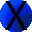
<style>
.page{position:relative;width:32px;height:32px}
.page>*{position:absolute;margin:0}
.t1{font:12px "MyriadPro-Regular";color:#000000}
</style>
<div class="page">
<p class="t1" style="left:5px;top:1px;width:23px;height:29px">X</p>
</div>
